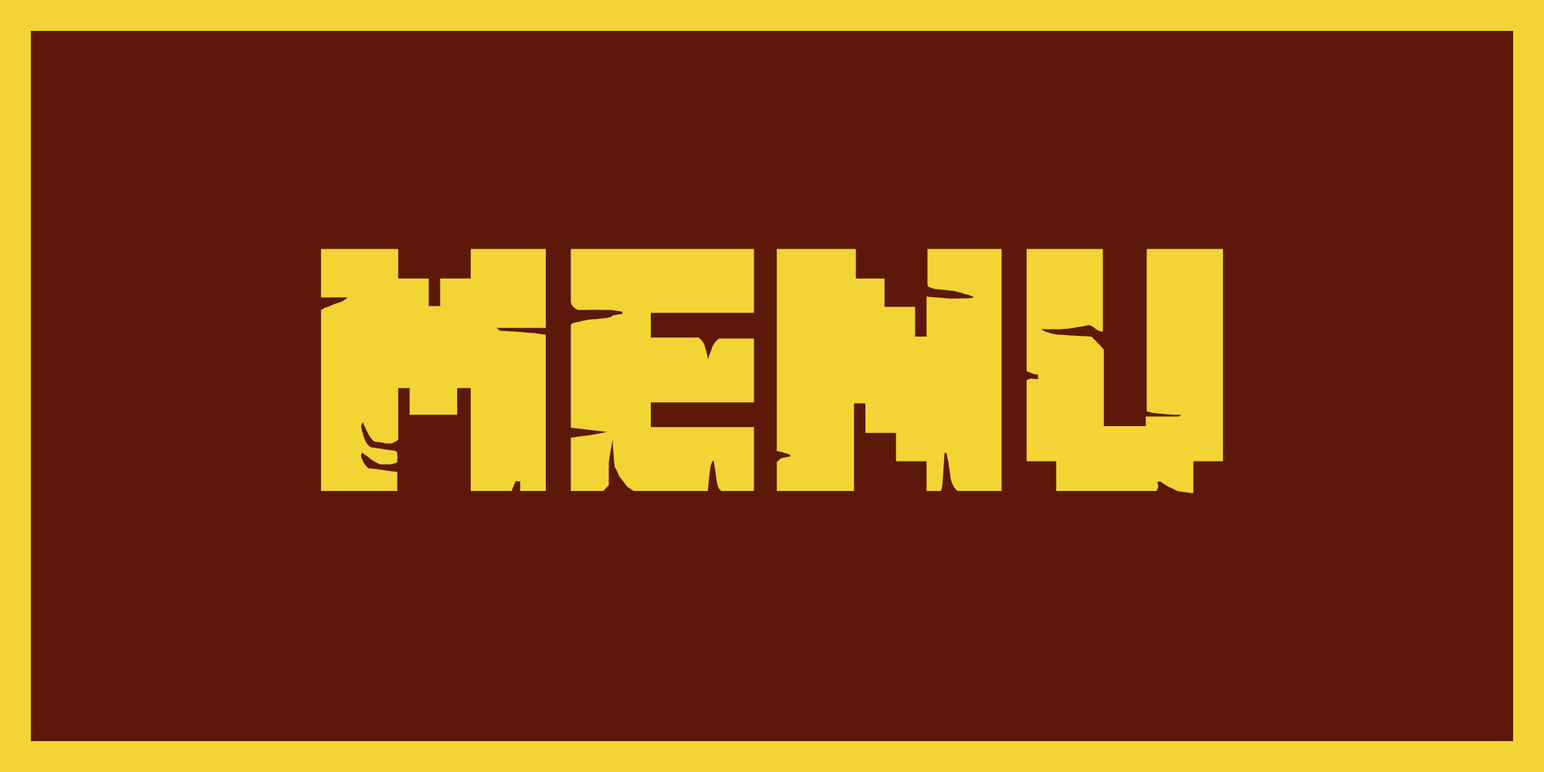
<style>
.page{position:relative;width:1544px;height:772px;background:#5d1809}
.page>*{position:absolute;margin:0}
.t1{font:308.9px "MinecrafterAlt";color:#f2d534}
</style>
<div class="page">
<p class="t1" style="left:320px;top:249px;width:904px;height:244px">MENU</p>
</div>
